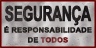
<style>
.page{position:relative;width:96px;height:48px}
.page>*{position:absolute;margin:0}
.t1{font:20.6px "Arial-BoldMT";letter-spacing:-0.04em;color:#141012;text-transform:uppercase;font-weight:bold;scale:0.66 1}
.t2{font:7px/10px "Arial-BoldMT";color:#141012;text-transform:uppercase;font-weight:bold;scale:1.07 1}
.t3{font:7px/10px "Arial-BoldMT";color:#6b1717;text-transform:uppercase;font-weight:bold;scale:1.07 1}
</style>
<div class="page">
<p class="t1" style="left:5px;top:5px;width:87px;height:21px">SEGURANÇA</p>
<p class="t2" style="left:4px;top:26px;width:88px;height:17px;text-align:center">É RESPONSABILIDADE<br>de<span class="t3"> TODOS</span></p>
</div>
